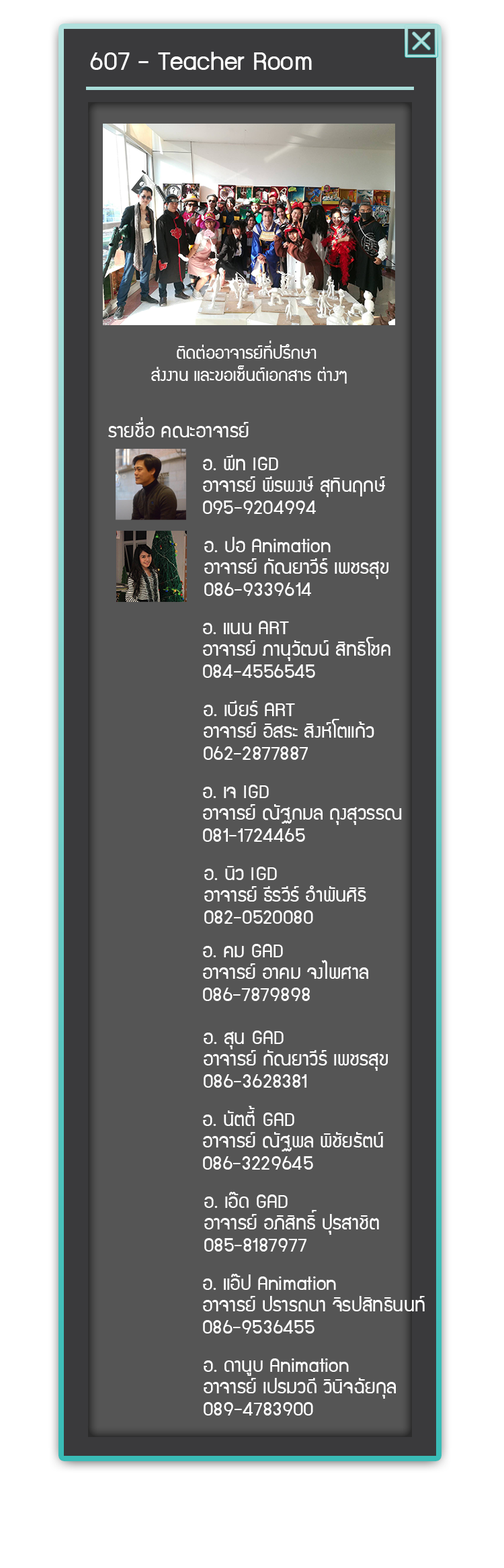
<style>
.page{position:relative;width:504px;height:1568px;background:#555555}
.page>*{position:absolute;margin:0}
.t1{font:29px "supermarket";color:#ffffff}
.t2{font:19.3px/22.5px "supermarket";color:#ffffff}
.t3{font:21.5px "supermarket";color:#ffffff}
.t4{font:21.5px/21.7px "supermarket";color:#ffffff}
</style>
<div class="page">
<p class="t1" style="left:90px;top:52px;width:222px;height:18px">607 - Teacher Room</p>
<p class="t2" style="left:151px;top:341px;width:196px;height:43px;text-align:center">ติดต่ออาจารย์ที่ปรึกษา <br>ส่งงาน และขอเซ็นต์เอกสาร ต่างๆ</p>
<p class="t3" style="left:108px;top:417px;width:141px;height:21px">รายชื่อ คณะอาจารย์</p>
<p class="t4" style="left:203px;top:455px;width:182px;height:59px">อ. พีท IGD<br>อาจารย์ พีรพงษ์ สุทินฤกษ์<br>095-9204994</p>
<p class="t4" style="left:204px;top:537px;width:184px;height:59px">อ. ปอ Animation<br>อาจารย์ กัณยาวีร์ เพชรสุข<br>086-9339614</p>
<p class="t4" style="left:203px;top:621px;width:187px;height:57px">อ. แนน ART<br>อาจารย์ ภานุวัฒน์ สิทธิโชค<br>084-4556545</p>
<p class="t4" style="left:204px;top:701px;width:170px;height:59px">อ. เบียร์ ART<br>อาจารย์ อิสระ สิงห์โตแก้ว<br>062-2877887</p>
<p class="t4" style="left:203px;top:785px;width:199px;height:57px">อ. เจ IGD<br>อาจารย์ ณัฐกมล ถุงสุวรรณ<br>081-1724465</p>
<p class="t4" style="left:204px;top:866px;width:162px;height:58px">อ. นิว IGD<br>อาจารย์ ธีรวีร์ อำพันศิริ<br>082-0520080</p>
<p class="t4" style="left:203px;top:944px;width:165px;height:57px">อ. คม GAD<br>อาจารย์ อาคม จงไพศาล<br>086-7879898</p>
<p class="t4" style="left:204px;top:1031px;width:184px;height:57px">อ. สุน GAD<br>อาจารย์ กัณยาวีร์ เพชรสุข<br>086-3628381</p>
<p class="t4" style="left:203px;top:1106px;width:180px;height:64px">อ. นัตตี้ GAD<br>อาจารย์ ณัฐพล พิชัยรัตน์<br>086-3229645</p>
<p class="t4" style="left:204px;top:1192px;width:175px;height:60px">อ. เอ๊ด GAD<br>อาจารย์ อภิสิทธิ์ ปุรสาชิต<br>085-8187977</p>
<p class="t4" style="left:203px;top:1274px;width:222px;height:60px">อ. แอ๊ป Animation<br>อาจารย์ ปรารถนา จิรปสิทธินนท์<br>086-9536455</p>
<p class="t4" style="left:204px;top:1358px;width:192px;height:57px">อ. ดานูบ Animation<br>อาจารย์ เปรมวดี วินิจฉัยกุล<br>089-4783900</p>
</div>
